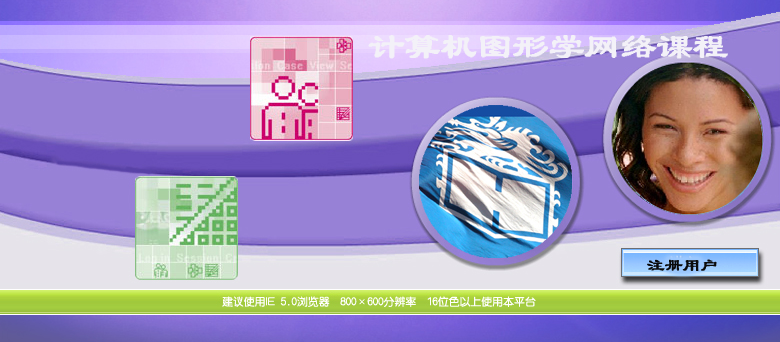
<style>
.page{position:relative;width:780px;height:342px}
.page>*{position:absolute;margin:0}
.t1{font:36px "Á¥Êé-Regular";color:#f3f1f8;font-weight:bold}
.t2{font:18px "Á¥Êé-Regular";color:#0a0a0a;font-weight:bold}
</style>
<div class="page">
<p class="t1" style="left:368px;top:35px;width:360px;height:24px">计算机图形学网络课程</p>
<p class="t2" style="left:647px;top:259px;width:70px;height:12px">注册用户</p>
</div>
